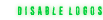
<style>
.page{position:relative;width:103px;height:20px;background:#ffffff}
.page>*{position:absolute;margin:0}
.t1{font:12px "Sunzoomspark";color:#00d03b}
</style>
<div class="page">
<p class="t1" style="left:18px;top:6px;width:84px;height:10px">D I S A B L E  L O G O S</p>
</div>
